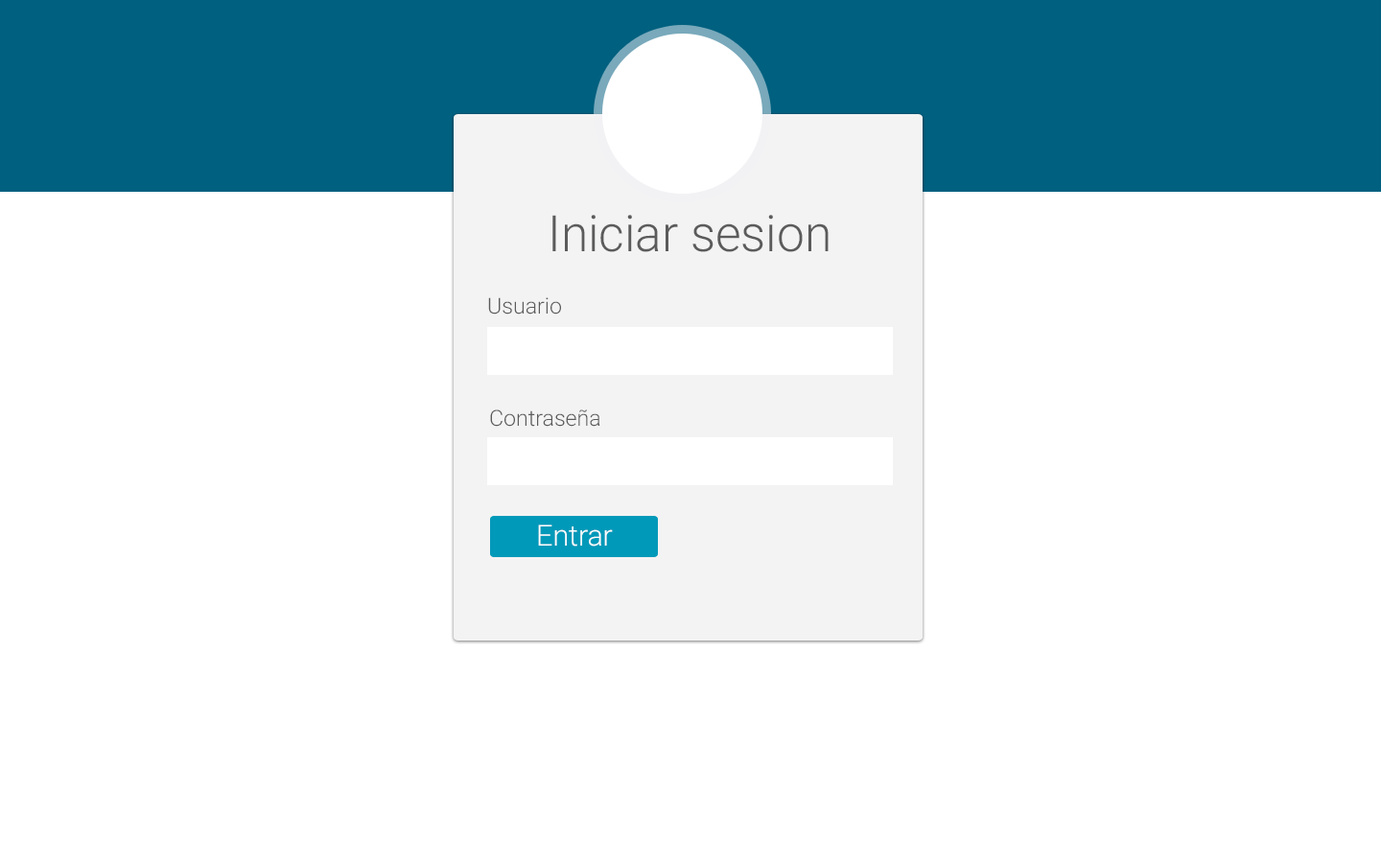
<style>
.page{position:relative;width:1381px;height:863px;background:#ffffff}
.page>*{position:absolute;margin:0}
.t1{font:50.2px "Roboto-Light";color:#5c5b5b}
.t2{font:22.1px "Roboto-Light";color:#5d5c5c}
.t3{font:22.1px "Roboto-Light";color:#5c5b5b}
.t4{font:29px "Roboto-Light";color:#ffffff}
</style>
<div class="page">
<p class="t1" style="left:553px;top:215px;width:276px;height:37px">Iniciar sesion</p>
<p class="t2" style="left:488px;top:297px;width:73px;height:18px">Usuario</p>
<p class="t3" style="left:490px;top:410px;width:110px;height:17px">Contraseña</p>
<p class="t4" style="left:538px;top:525px;width:75px;height:22px">Entrar</p>
</div>
